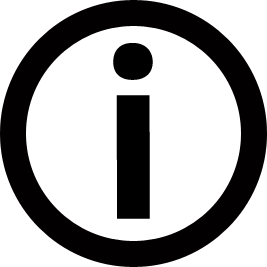
<style>
.page{position:relative;width:267px;height:267px;background:#ffffff}
.page>*{position:absolute;margin:0}
.t1{font:246.6px "PTSansPro-CondExtraBold";color:#000000}
</style>
<div class="page">
<p class="t1" style="left:113px;top:43px;width:40px;height:176px">i</p>
</div>
